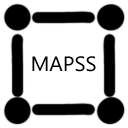
<style>
.page{position:relative;width:128px;height:128px;background:#ffffff}
.page>*{position:absolute;margin:0}
.t1{font:20.8px "SegoeUI";color:#000000}
</style>
<div class="page">
<p class="t1" style="left:32px;top:56px;width:64px;height:16px">MAPSS</p>
</div>
